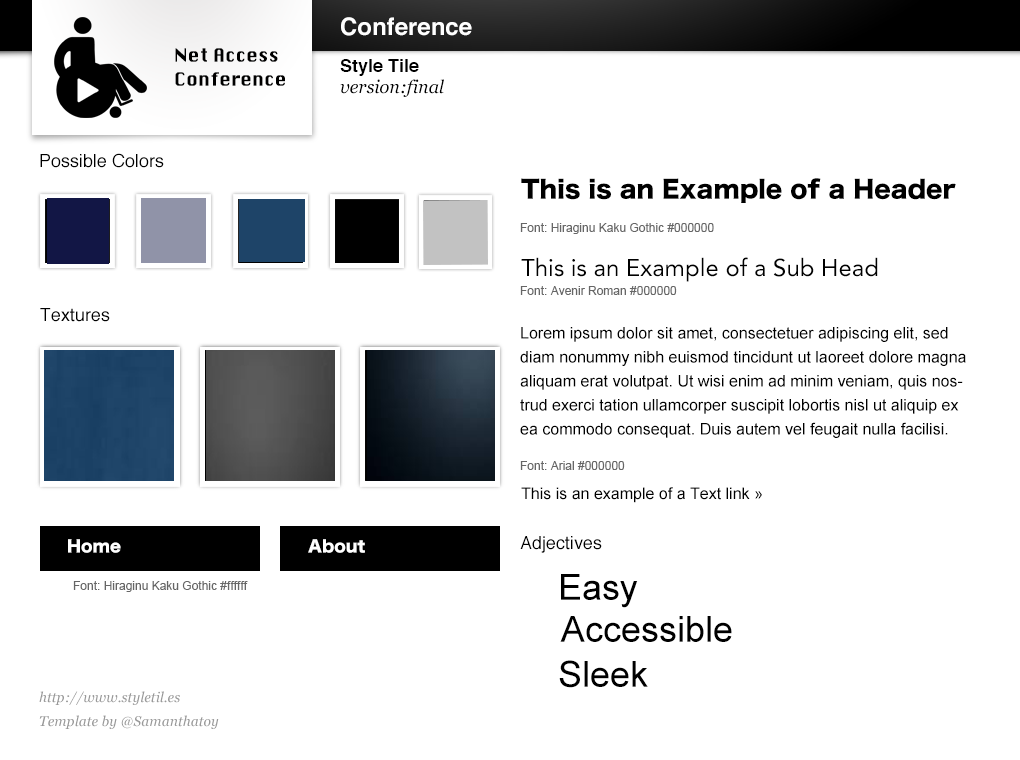
<style>
.page{position:relative;width:1020px;height:760px;background:#ffffff}
.page>*{position:absolute;margin:0}
.t1{font:24px "Helvetica-Bold";color:#ffffff}
.t2{font:18px/24px "Krungthep";color:#000000}
.t3{font:18px "Helvetica-Bold";color:#000000}
.t4{font:18px "Georgia-Italic";color:#000000}
.t5{font:18px "Helvetica";color:#000000}
.t6{font:24px "HiraKakuStd-W8";color:#000000}
.t7{font:12px "ArialMT";color:#666666}
.t8{font:24px "Avenir-Roman";color:#000000}
.t9{font:16px/24px "ArialMT";color:#000000}
.t10{font:16px "ArialMT";color:#000000}
.t11{font:16px "HiraKakuStd-W8";color:#ffffff}
.t12{font:36px "ArialMT";color:#000000}
.t13{font:14px/24px "Georgia-Italic";color:#999999}
</style>
<div class="page">
<p class="t1" style="left:341px;top:17px;width:131px;height:19px">Conference</p>
<p class="t2" style="left:175px;top:48px;width:110px;height:38px">Net Access<br>Conference</p>
<p class="t3" style="left:340px;top:59px;width:79px;height:17px">Style Tile</p>
<p class="t4" style="left:340px;top:79px;width:104px;height:18px">version:final</p>
<p class="t5" style="left:40px;top:153px;width:124px;height:15px">Possible Colors</p>
<p class="t6" style="left:521px;top:178px;width:435px;height:25px">This is an Example of a Header</p>
<p class="t7" style="left:520px;top:223px;width:194px;height:11px">Font: Hiraginu Kaku Gothic #000000</p>
<p class="t8" style="left:521px;top:257px;width:357px;height:25px">This is an Example of a Sub Head</p>
<p class="t7" style="left:520px;top:286px;width:157px;height:9px">Font: Avenir Roman #000000</p>
<p class="t5" style="left:40px;top:308px;width:70px;height:14px">Textures</p>
<p class="t9" style="left:520px;top:327px;width:446px;height:111px">Lorem ipsum dolor sit amet, consectetuer adipiscing elit, sed diam nonummy nibh euismod tincidunt ut laoreet dolore magna aliquam erat volutpat. Ut wisi enim ad minim veniam, quis nostrud exerci tation ullamcorper suscipit lobortis nisl ut aliquip ex ea commodo consequat. Duis autem vel feugait nulla facilisi.</p>
<p class="t7" style="left:520px;top:461px;width:105px;height:9px">Font: Arial #000000</p>
<p class="t10" style="left:521px;top:487px;width:241px;height:16px">This is an example of a Text link »</p>
<p class="t11" style="left:68px;top:539px;width:53px;height:14px">Home</p>
<p class="t11" style="left:308px;top:539px;width:57px;height:14px">About</p>
<p class="t5" style="left:520px;top:536px;width:82px;height:17px">Adjectives</p>
<p class="t7" style="left:73px;top:581px;width:175px;height:11px">Font: Hiraginu Kaku Gothic #ffffff</p>
<p class="t12" style="left:561px;top:574px;width:77px;height:34px">Easy</p>
<p class="t12" style="left:560px;top:616px;width:172px;height:26px">Accessible</p>
<p class="t12" style="left:559px;top:660px;width:89px;height:28px">Sleek</p>
<p class="t13" style="left:39px;top:691px;width:180px;height:38px">http://www.styletil.es<br>Template by @Samanthatoy</p>
</div>
